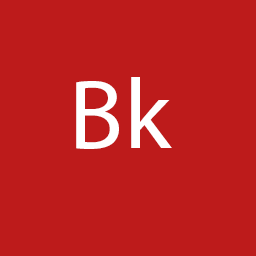
<style>
.page{position:relative;width:256px;height:256px;background:#bd1b1b}
.page>*{position:absolute;margin:0}
.t1{font:100px "MyriadPro-Regular";color:#ffffff}
</style>
<div class="page">
<p class="t1" style="left:76px;top:77px;width:96px;height:72px">Bk</p>
</div>
